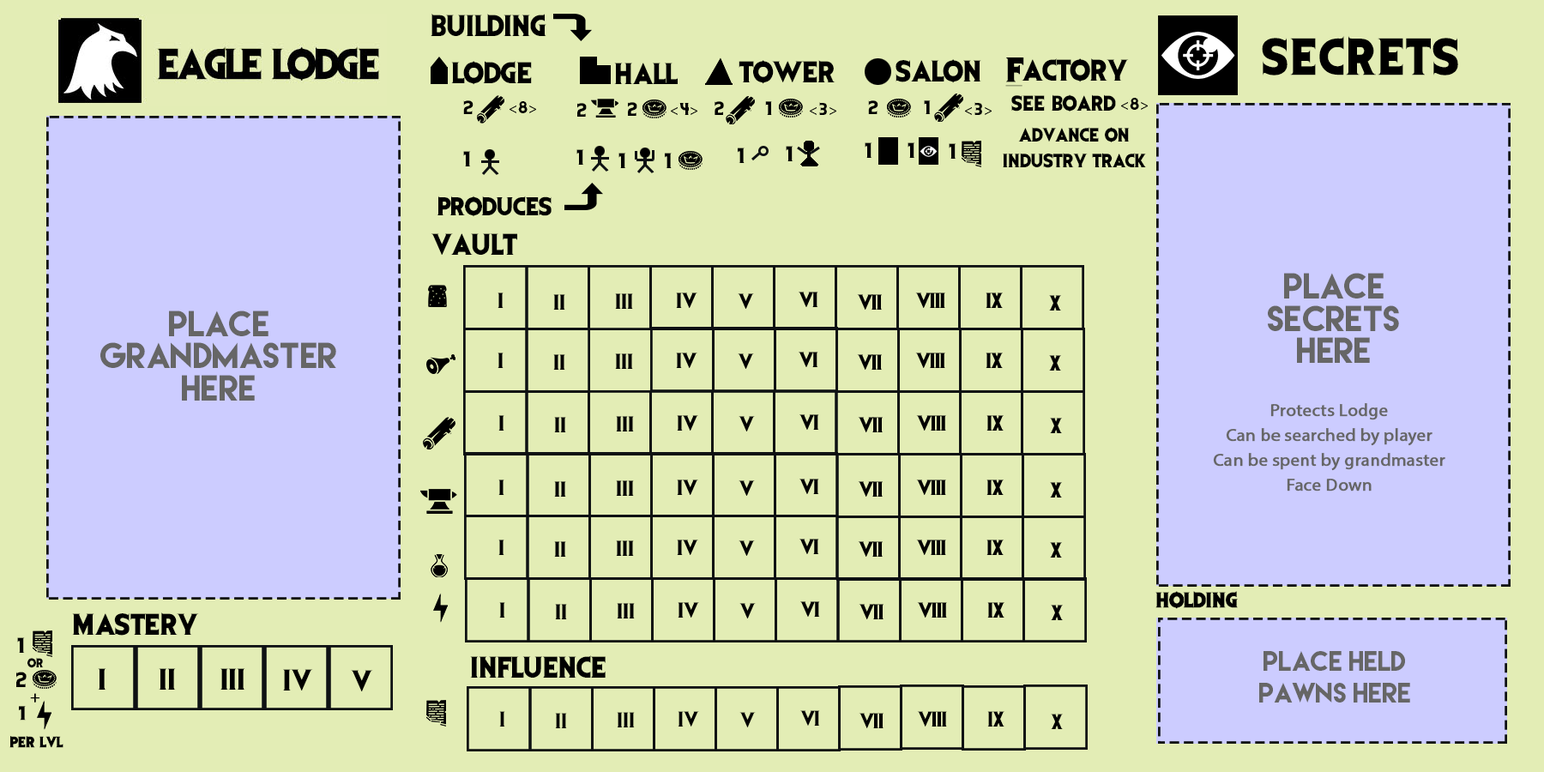
<style>
.page{position:relative;width:1544px;height:772px;background:#e3edb5}
.page>*{position:absolute;margin:0}
.t1{font:25px "EvilDead";color:#000000}
.t2{font:42.9px "EvilDead";letter-spacing:0.05em;color:#000000}
.t3{font:28.6px "EvilDead";color:#000000;font-weight:bold;text-decoration:underline}
.t4{font:16.1px "EvilDead";color:#000000}
.t5{font:14.3px "MyriadPro-Regular";color:#000000}
.t6{font:14.3px "EvilDead";color:#000000}
.t7{font:17.9px "EvilDead";color:#000000}
.t8{font:16.1px/25px "EvilDead";color:#000000}
.t9{font:21.4px "EvilDead";color:#000000}
.t10{font:32.2px/32.2px "LemonMilk";color:#666666}
.t11{font:17.9px/25px "MyriadPro-Regular";color:#666666;font-weight:bold}
.t12{font:17.9px "EvilDead";color:#000000;font-weight:bold}
.t13{font:25px/32.2px "LemonMilk";color:#666666}
.t14{font:10.7px "EvilDead";color:#000000}
.t15{font:16.1px "MyriadPro-Regular";color:#000000;font-weight:bold}
.t16{font:16.1px "EvilDead";color:#000000;font-weight:bold}
.t17{font:17.9px "EvilDead";letter-spacing:-0.05em;color:#000000}
.t18{font:12.5px "EvilDead";color:#000000;font-weight:bold}
</style>
<div class="page">
<p class="t1" style="left:431px;top:14px;width:116px;height:22px">BUILDING</p>
<p class="t2" style="left:1262px;top:36px;width:197px;height:39px">SECRETS</p>
<p class="t1" style="left:451px;top:61px;width:81px;height:24px">LODGE</p>
<p class="t1" style="left:614px;top:63px;width:64px;height:21px">HALL</p>
<p class="t1" style="left:739px;top:60px;width:97px;height:24px">Tower</p>
<p class="t1" style="left:896px;top:59px;width:85px;height:24px">SALON</p>
<p class="t3" style="left:1006px;top:57px;width:18px;height:30px">F</p>
<p class="t1" style="left:1022px;top:58px;width:107px;height:24px">ACTORY</p>
<p class="t4" style="left:463px;top:100px;width:11px;height:14px">2</p>
<p class="t5" style="left:510px;top:101px;width:26px;height:12px">&lt;<span class="t6">8</span>&gt;</p>
<p class="t4" style="left:715px;top:101px;width:9px;height:14px">2</p>
<p class="t4" style="left:765px;top:101px;width:7px;height:14px">1</p>
<p class="t4" style="left:868px;top:100px;width:11px;height:14px">2</p>
<p class="t4" style="left:924px;top:100px;width:7px;height:14px">1</p>
<p class="t7" style="left:1012px;top:94px;width:104px;height:18px">SEE BOARD</p>
<p class="t5" style="left:1121px;top:98px;width:27px;height:12px">&lt;<span class="t6">8</span>&gt;</p>
<p class="t4" style="left:577px;top:103px;width:10px;height:14px">2</p>
<p class="t4" style="left:628px;top:102px;width:9px;height:14px">2</p>
<p class="t5" style="left:671px;top:103px;width:27px;height:12px">&lt;<span class="t6">4</span>&gt;</p>
<p class="t5" style="left:810px;top:102px;width:26px;height:13px">&lt;<span class="t6">3</span>&gt;</p>
<p class="t5" style="left:965px;top:102px;width:27px;height:13px">&lt;<span class="t6">3</span>&gt;</p>
<p class="t8" style="left:1003px;top:127px;width:143px;height:41px;text-align:center">AdVANCE ON<br>INDUSTRY TRACK</p>
<p class="t7" style="left:577px;top:149px;width:7px;height:16px">1</p>
<p class="t7" style="left:738px;top:148px;width:7px;height:15px">1</p>
<p class="t7" style="left:786px;top:146px;width:8px;height:15px">1</p>
<p class="t7" style="left:865px;top:142px;width:8px;height:16px">1</p>
<p class="t7" style="left:908px;top:142px;width:7px;height:16px">1</p>
<p class="t7" style="left:949px;top:143px;width:8px;height:16px">1</p>
<p class="t7" style="left:463px;top:151px;width:8px;height:15px">1</p>
<p class="t7" style="left:619px;top:153px;width:7px;height:15px">1</p>
<p class="t7" style="left:665px;top:153px;width:7px;height:15px">1</p>
<p class="t9" style="left:437px;top:196px;width:115px;height:21px">PRODUCES</p>
<p class="t1" style="left:431px;top:233px;width:86px;height:22px">VAULT</p>
<p class="t10" style="left:1268px;top:273px;width:131px;height:90px;text-align:center">PLACE<br>SECRETS<br>HERE</p>
<p class="t10" style="left:100px;top:311px;width:236px;height:90px;text-align:center">PLACE<br>GRANDMASTER<br>HERE</p>
<p class="t11" style="left:1213px;top:403px;width:233px;height:89px;text-align:center">Protects Lodge<br>Can be searched by player<br>Can be spent by grandmaster<br>Face Down</p>
<p class="t12" style="left:1156px;top:591px;width:82px;height:18px">HOLDING</p>
<p class="t1" style="left:72px;top:613px;width:127px;height:23px">MASTERY</p>
<p class="t7" style="left:17px;top:637px;width:8px;height:16px">1</p>
<p class="t13" style="left:1259px;top:651px;width:151px;height:52px;text-align:center">Place HELD<br>PAWNS HERE</p>
<p class="t14" style="left:27px;top:657px;width:17px;height:11px">or</p>
<p class="t1" style="left:470px;top:655px;width:136px;height:23px">INFLUENCE</p>
<p class="t7" style="left:16px;top:672px;width:11px;height:15px">2</p>
<p class="t1" style="left:98px;top:668px;width:8px;height:22px">I</p>
<p class="t1" style="left:159px;top:668px;width:17px;height:22px">II</p>
<p class="t1" style="left:220px;top:668px;width:25px;height:22px">III</p>
<p class="t1" style="left:283px;top:669px;width:30px;height:22px">IV</p>
<p class="t1" style="left:351px;top:670px;width:22px;height:22px">V</p>
<p class="t15" style="left:30px;top:693px;width:9px;height:10px">+</p>
<p class="t16" style="left:19px;top:706px;width:7px;height:15px">1</p>
<p class="t7" style="left:499px;top:711px;width:6px;height:16px">I</p>
<p class="t7" style="left:555px;top:713px;width:12px;height:15px">II</p>
<p class="t7" style="left:617px;top:712px;width:18px;height:16px">III</p>
<p class="t7" style="left:678px;top:711px;width:21px;height:16px">IV</p>
<p class="t7" style="left:740px;top:712px;width:16px;height:16px">V</p>
<p class="t17" style="left:800px;top:710px;width:20px;height:16px">VI</p>
<p class="t17" style="left:859px;top:713px;width:25px;height:15px">VII</p>
<p class="t17" style="left:917px;top:711px;width:30px;height:16px">VIII</p>
<p class="t17" style="left:987px;top:711px;width:18px;height:16px">IX</p>
<p class="t17" style="left:1051px;top:714px;width:12px;height:15px">X</p>
<p class="t18" style="left:9px;top:736px;width:54px;height:12px">PER LVL</p>
</div>
